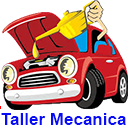
<style>
.page{position:relative;width:128px;height:128px;background:#ffffff}
.page>*{position:absolute;margin:0}
.t1{font:17px "Arial-BoldMT";color:#070cf5}
</style>
<div class="page">
<p class="t1" style="left:1px;top:113px;width:125px;height:12px">Taller Mecanica</p>
</div>
